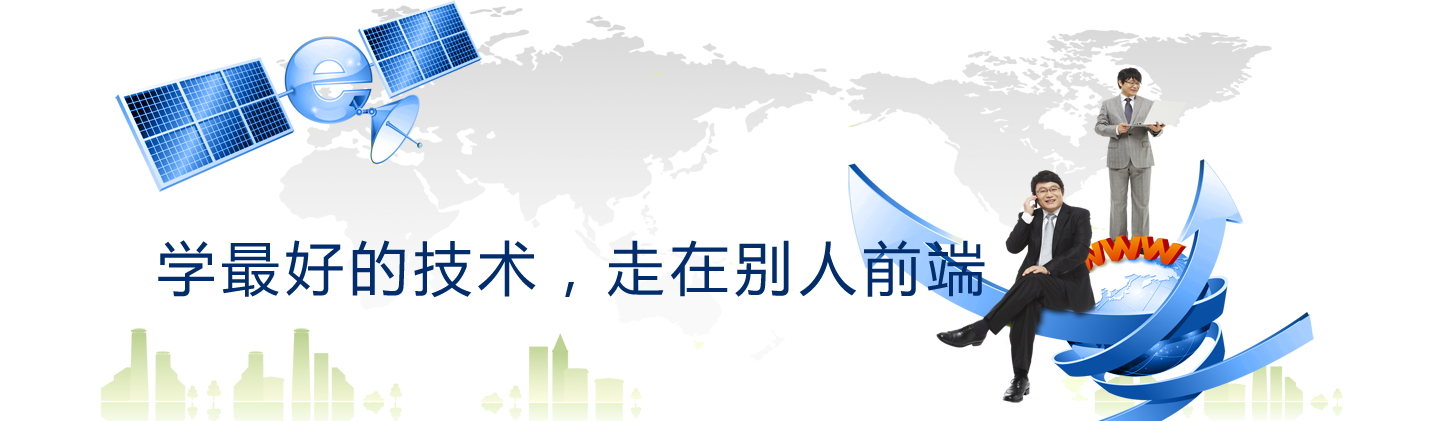
<style>
.page{position:relative;width:1440px;height:421px;background:#ffffff}
.page>*{position:absolute;margin:0}
.t1{font:58.3px "MicrosoftYaHei";letter-spacing:0.1em;color:#022d6d}
</style>
<div class="page">
<p class="t1" style="left:158px;top:240px;width:827px;height:58px">学最好的技术，走在别人前端</p>
</div>
